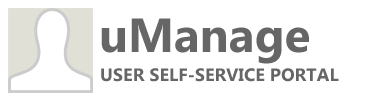
<style>
.page{position:relative;width:370px;height:100px;background:#ffffff}
.page>*{position:absolute;margin:0}
.t1{font:48px "SegoeUI-Bold";color:#666666}
.t2{font:18px "SegoeUI-Bold";color:#666666;text-transform:uppercase}
</style>
<div class="page">
<p class="t1" style="left:101px;top:18px;width:208px;height:46px">uManage</p>
<p class="t2" style="left:101px;top:68px;width:238px;height:14px">User Self-Service Portal</p>
</div>
